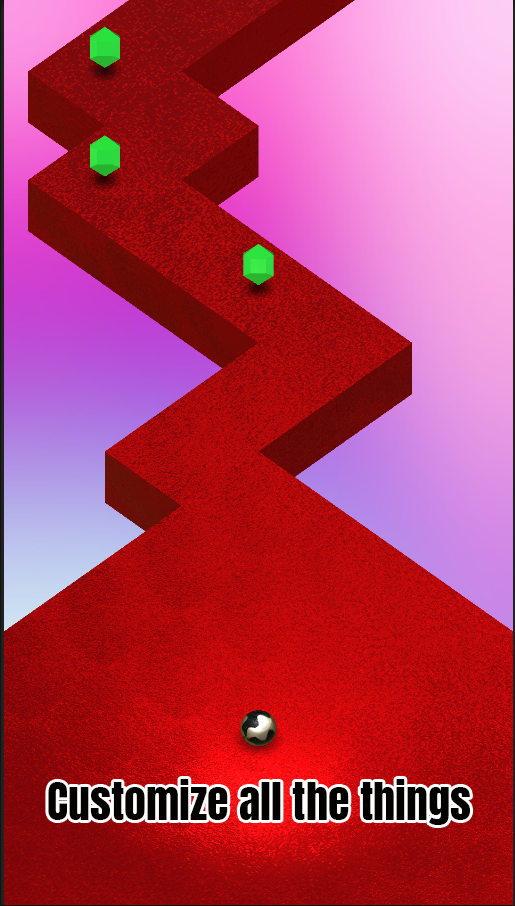
<style>
.page{position:relative;width:515px;height:906px}
.page>*{position:absolute;margin:0}
.t1{font:44px "Anton-Regular";color:#030200}
</style>
<div class="page">
<p class="t1" style="left:48px;top:779px;width:423px;height:46px">Customize all the things</p>
</div>
